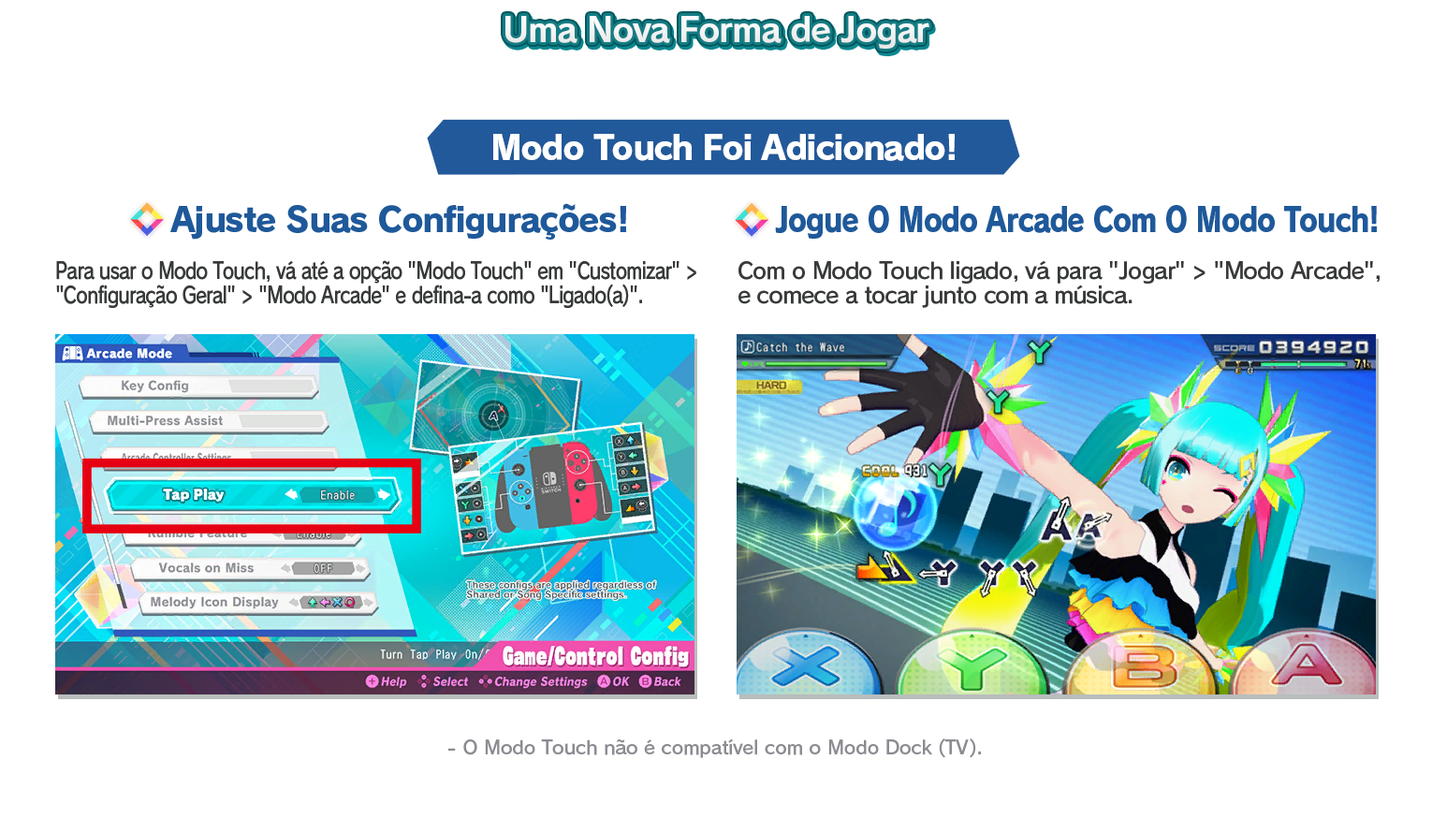
<style>
.page{position:relative;width:1432px;height:833px;background:#ffffff}
.page>*{position:absolute;margin:0}
.t1{font:33.7px "RodinPro-B";letter-spacing:-0.039em;color:#f2f3f3}
.t2{font:33.7px "RodinPro-EB";letter-spacing:-0.048em;color:#ffffff}
.t3{font:33.7px "RodinPro-EB";letter-spacing:-0.04em;color:#1f599a}
.t4{font:33.7px "RodinPro-EB";letter-spacing:-0.04em;color:#1f599a;scale:0.85 1}
.t5{font:22.5px/23.7px "RodinPro-DB";letter-spacing:-0.04em;color:#383a3a;scale:0.82 1}
.t6{font:22.5px/23.7px "RodinPro-DB";letter-spacing:-0.04em;color:#383a3a}
.t7{font:18.7px "RodinPro-DB";letter-spacing:-0.014em;color:#8c8b92}
</style>
<div class="page">
<p class="t1" style="left:505px;top:16px;width:424px;height:33px">Uma Nova Forma de Jogar</p>
<p class="t2" style="left:493px;top:134px;width:462px;height:27px">Modo Touch Foi Adicionado!</p>
<p class="t3" style="left:170px;top:203px;width:456px;height:37px">Ajuste Suas Configurações!</p>
<p class="t4" style="left:775px;top:205px;width:602px;height:34px">Jogue O Modo Arcade Com O Modo Touch!</p>
<p class="t5" style="left:56px;top:260px;width:640px;height:48px">Para usar o Modo Touch, vá até a opção "Modo Touch" em "Customizar" &gt;<br>"Configuração Geral" &gt; "Modo Arcade" e defina-a como "Ligado(a)".</p>
<p class="t6" style="left:738px;top:260px;width:641px;height:48px">Com o Modo Touch ligado, vá para "Jogar" &gt; "Modo Arcade",<br>e comece a tocar junto com a música.</p>
<p class="t7" style="left:448px;top:738px;width:533px;height:20px">- O Modo Touch não é compatível com o Modo Dock (TV).</p>
</div>
